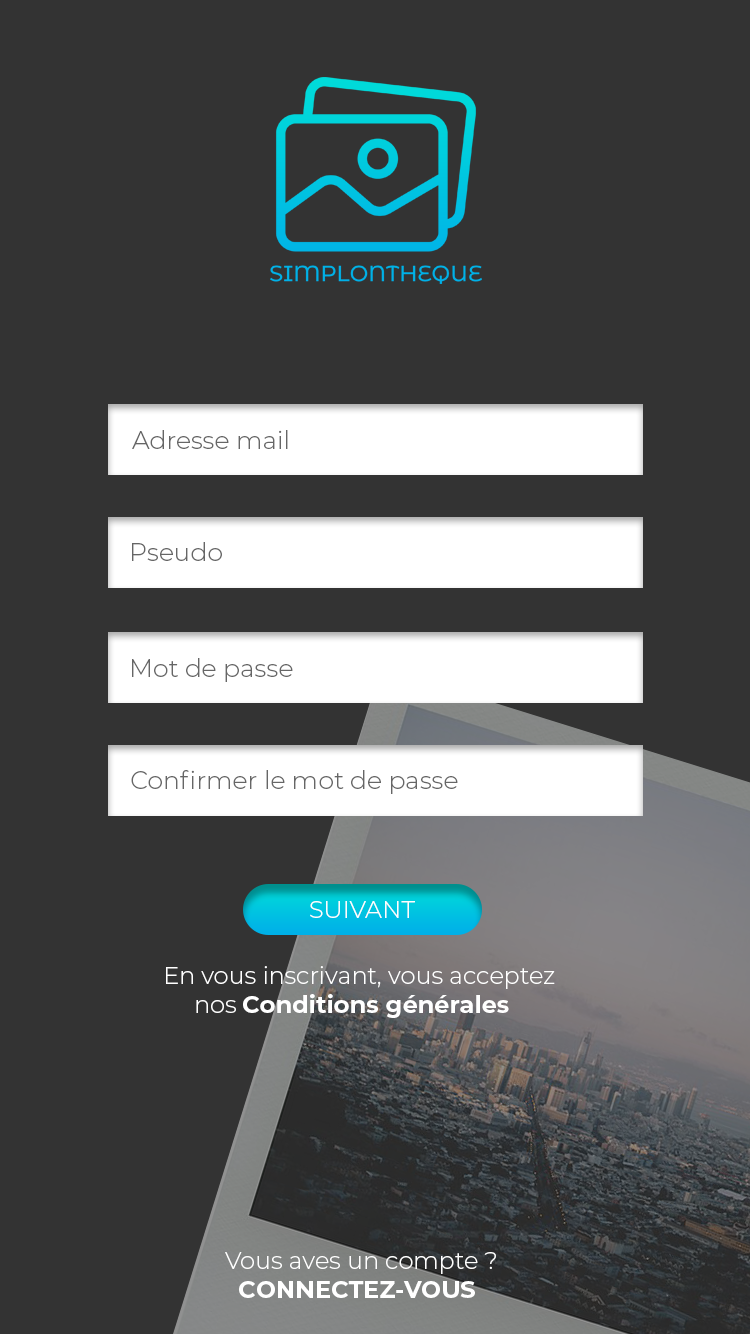
<style>
.page{position:relative;width:750px;height:1334px;background:#333333}
.page>*{position:absolute;margin:0}
.t1{font:25px "Montserrat-Light";color:#666666}
.t2{font:24px "Montserrat-Light";color:#fffefe}
.t3{font:24px "Montserrat-Light";color:#ffffff}
.t4{font:24px "Montserrat-Bold";color:#ffffff}
</style>
<div class="page">
<p class="t1" style="left:132px;top:430px;width:156px;height:19px">Adresse mail</p>
<p class="t1" style="left:132px;top:542px;width:90px;height:19px">Pseudo</p>
<p class="t1" style="left:132px;top:658px;width:161px;height:24px">Mot de passe</p>
<p class="t1" style="left:131px;top:770px;width:327px;height:24px">Confirmer le mot de passe</p>
<p class="t2" style="left:310px;top:901px;width:105px;height:17px">SUIVANT</p>
<p class="t3" style="left:166px;top:966px;width:389px;height:52px">En vous inscrivant, vous acceptez  <br>     nos <span class="t4">Conditions générales</span></p>
<p class="t3" style="left:225px;top:1252px;width:271px;height:46px">Vous aves un compte ?<br><span class="t4">  CONNECTEZ-VOUS</span></p>
</div>
